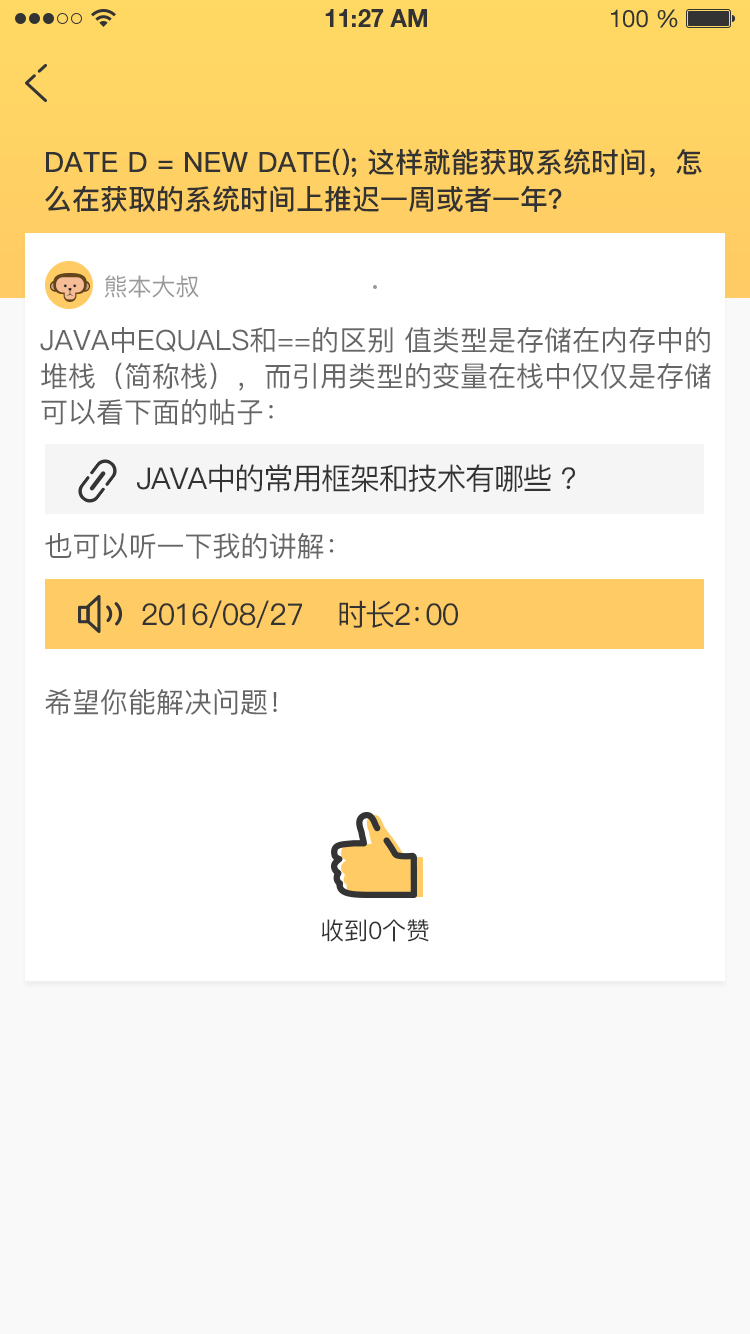
<style>
.page{position:relative;width:750px;height:1334px;background:#ffffff}
.page>*{position:absolute;margin:0}
.t1{font:28px/37px "PingFang-SC-Bold";color:#333333;text-transform:uppercase}
.t2{font:24px "PingFang-SC-Medium";color:#999999;text-transform:uppercase}
.t3{font:28px/36px "PingFang-SC-Medium";color:#666666;text-transform:uppercase}
.t4{font:30px "PingFang-SC-Medium";letter-spacing:-0.04em;color:#333333;text-transform:uppercase}
.t5{font:28px "PingFang-SC-Medium";color:#666666;text-transform:uppercase}
.t6{font:30px "PingFang-SC-Medium";letter-spacing:-0.06em;color:#333333;text-transform:uppercase}
.t7{font:30px "PingFang-SC-Medium";letter-spacing:-0.48em;color:#333333;text-transform:uppercase}
.t8{font:24px "PingFang-SC-Medium";color:#333333;text-transform:uppercase}
</style>
<div class="page">
<p class="t1" style="left:45px;top:148px;width:657px;height:64px">Date d = new Date(); 这样就能获取系统时间，怎<br>么在获取的系统时间上推迟一周或者一年？</p>
<p class="t2" style="left:104px;top:275px;width:95px;height:23px">熊本大叔</p>
<p class="t3" style="left:40px;top:327px;width:671px;height:98px">java中equals和==的区别 值类型是存储在内存中的堆栈（简称栈），而引用类型的变量在栈中仅仅是存储可以看下面的帖子：</p>
<p class="t4" style="left:137px;top:464px;width:438px;height:29px">Java中的常用框架和技术有哪些 ?</p>
<p class="t5" style="left:45px;top:533px;width:289px;height:26px">也可以听一下我的讲解：</p>
<p class="t4" style="left:142px;top:600px;width:160px;height:28px">2016/08/27</p>
<p class="t6" style="left:339px;top:600px;width:119px;height:28px">时长2<span class="t7">：</span>00</p>
<p class="t5" style="left:45px;top:689px;width:232px;height:26px">希望你能解决问题！</p>
<p class="t8" style="left:321px;top:919px;width:108px;height:23px">收到0个赞</p>
</div>
